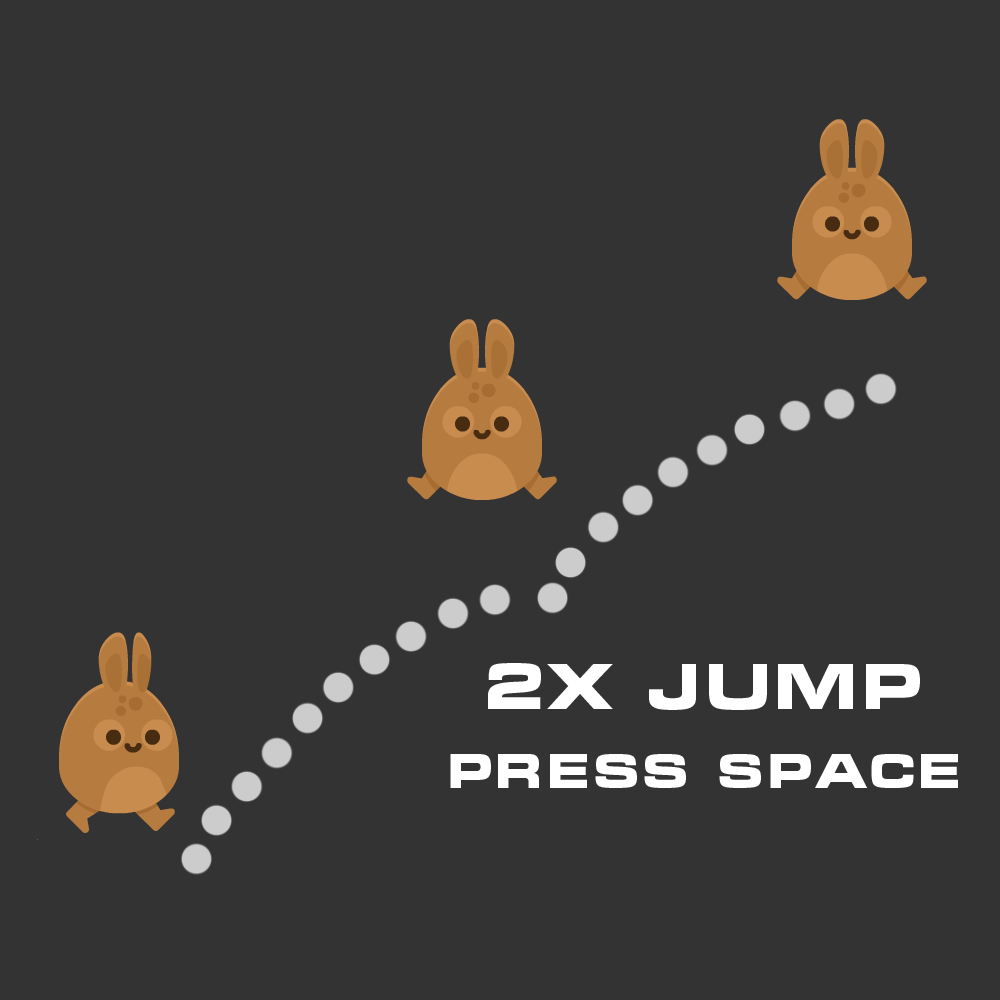
<style>
.page{position:relative;width:1000px;height:1000px;background:#333333}
.page>*{position:absolute;margin:0}
.t1{font:64px "MicraC-Bold";color:#ffffff}
.t2{font:48px "MicraC-Bold";color:#ffffff}
</style>
<div class="page">
<p class="t1" style="left:488px;top:663px;width:432px;height:47px">2x jump</p>
<p class="t2" style="left:450px;top:754px;width:508px;height:34px">Press Space</p>
</div>
